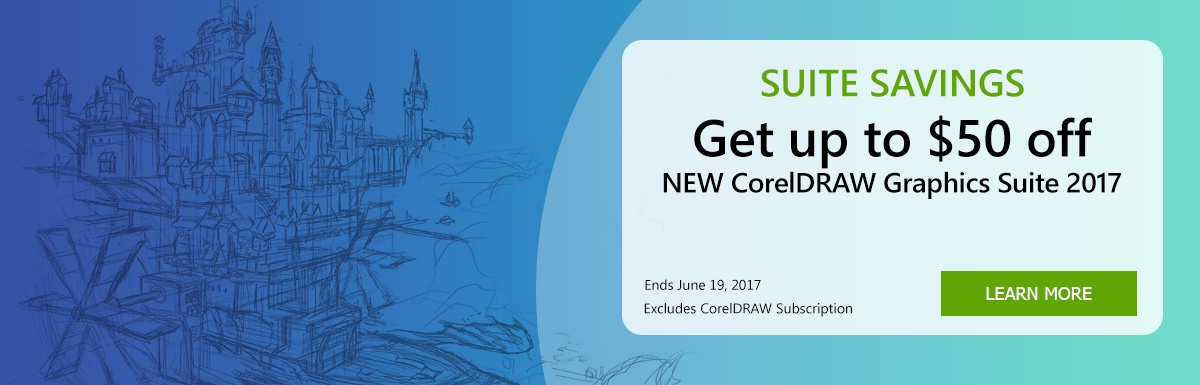
<style>
.page{position:relative;width:1200px;height:385px}
.page>*{position:absolute;margin:0}
.t1{font:38px "SegoeUI-Semibold";color:#60a706;text-transform:uppercase}
.t2{font:28px/36px "SegoeUI-Semibold";letter-spacing:-0.015em;color:#000000}
.t3{font:52px/36px "SegoeUI-Semibold";letter-spacing:-0.005em;color:#000000}
.t4{font:14px "SegoeUI";color:#000000}
.t5{font:18px "Tahoma";color:#ffffff;text-transform:uppercase}
</style>
<div class="page">
<p class="t1" style="left:761px;top:69px;width:263px;height:28px">Suite Savings</p>
<p class="t2" style="left:663px;top:115px;width:459px;height:84px;text-align:center"><span class="t3">Get up to $50 off<br></span>NEW CorelDRAW Graphics Suite 2017</p>
<p class="t4" style="left:645px;top:279px;width:116px;height:13px">Ends June 19, 2017</p>
<p class="t5" style="left:986px;top:287px;width:106px;height:13px">Learn More</p>
<p class="t4" style="left:644px;top:303px;width:208px;height:14px">Excludes CorelDRAW Subscription</p>
</div>
